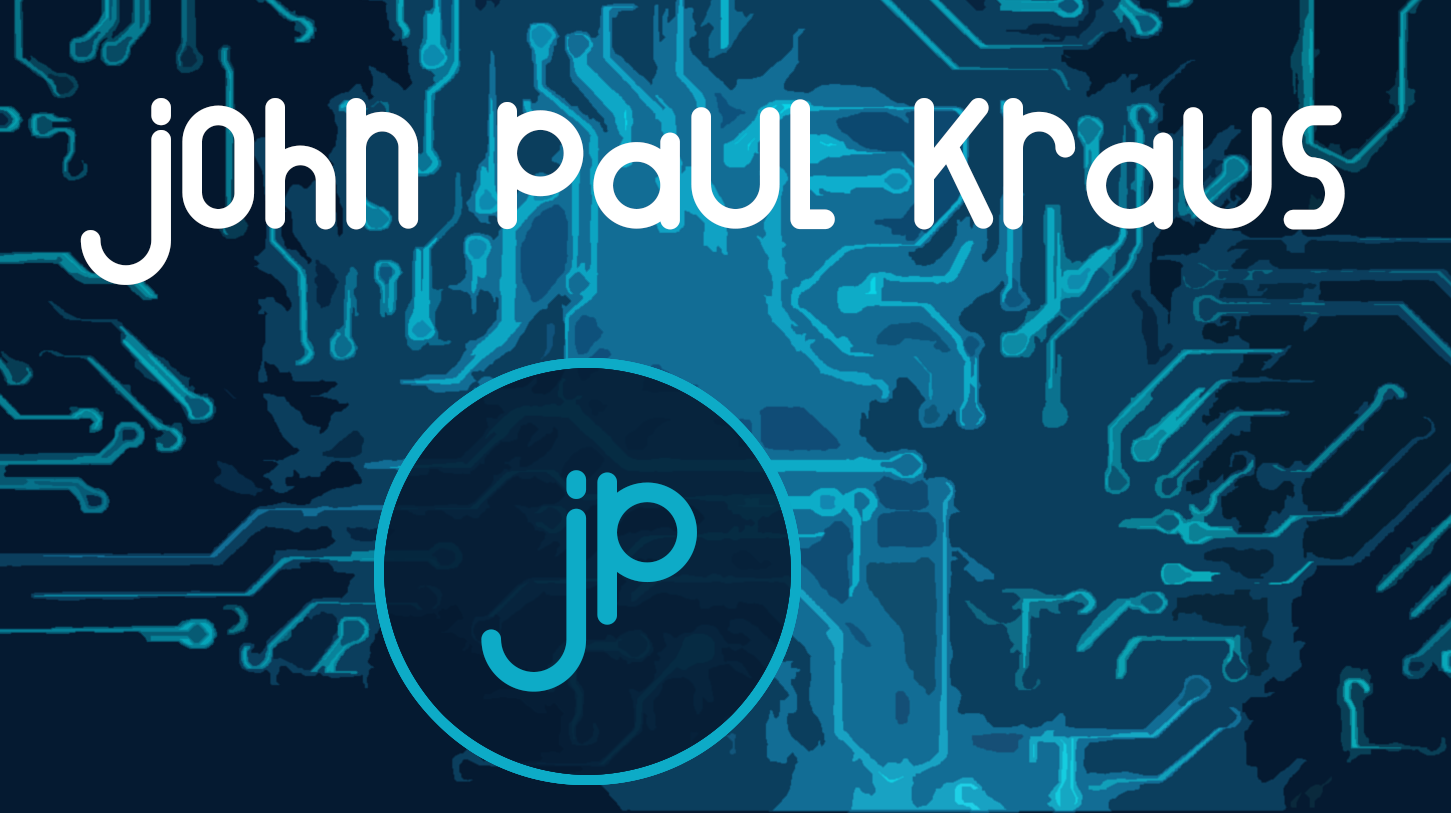
<style>
.page{position:relative;width:1451px;height:813px}
.page>*{position:absolute;margin:0}
.t1{font:216px "MOONKNIGHTRegular";color:#ffffff;font-weight:bold}
.t2{font:216px "MOONKNIGHTRegular";color:#0dabc7;font-weight:bold}
.t3{font:216px "MOONKNIGHTRegular";color:#00ffff}
</style>
<div class="page">
<p class="t1" style="left:80px;top:98px;width:1265px;height:187px">john paul kraus</p>
<p class="t2" style="left:481px;top:470px;width:216px;height:222px"><span class="t3"> </span> JP</p>
</div>
